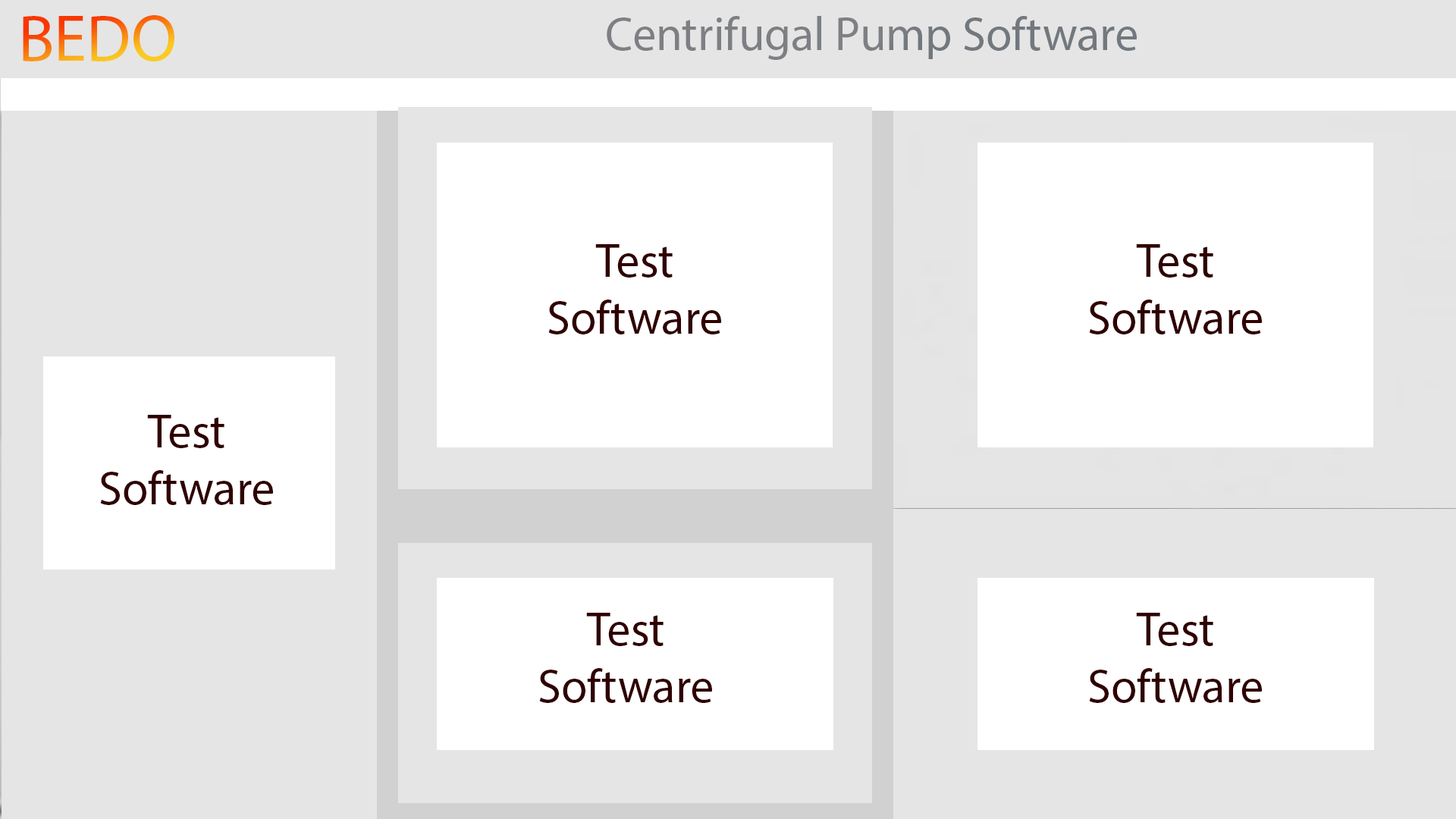
<style>
.page{position:relative;width:1456px;height:819px;background:#e5e5e5}
.page>*{position:absolute;margin:0}
.t1{font:66.4px "MyriadPro-Regular"}
.t2{font:47.4px "MyriadPro-Regular";color:#7d7f83}
.t3{font:47.4px "MyriadPro-Regular";color:#300000}
</style>
<div class="page">
<p class="t1" style="left:23px;top:15px;width:151px;height:46px">BEDO</p>
<p class="t2" style="left:607px;top:16px;width:530px;height:44px">Centrifugal Pump Software</p>
<p class="t3" style="left:548px;top:244px;width:173px;height:90px;text-align:center">Test <br>Software</p>
<p class="t3" style="left:1089px;top:244px;width:173px;height:90px;text-align:center">Test <br>Software</p>
<p class="t3" style="left:100px;top:415px;width:173px;height:90px;text-align:center">Test <br>Software</p>
<p class="t3" style="left:539px;top:613px;width:173px;height:90px;text-align:center">Test <br>Software</p>
<p class="t3" style="left:1089px;top:613px;width:173px;height:90px;text-align:center">Test <br>Software</p>
</div>
